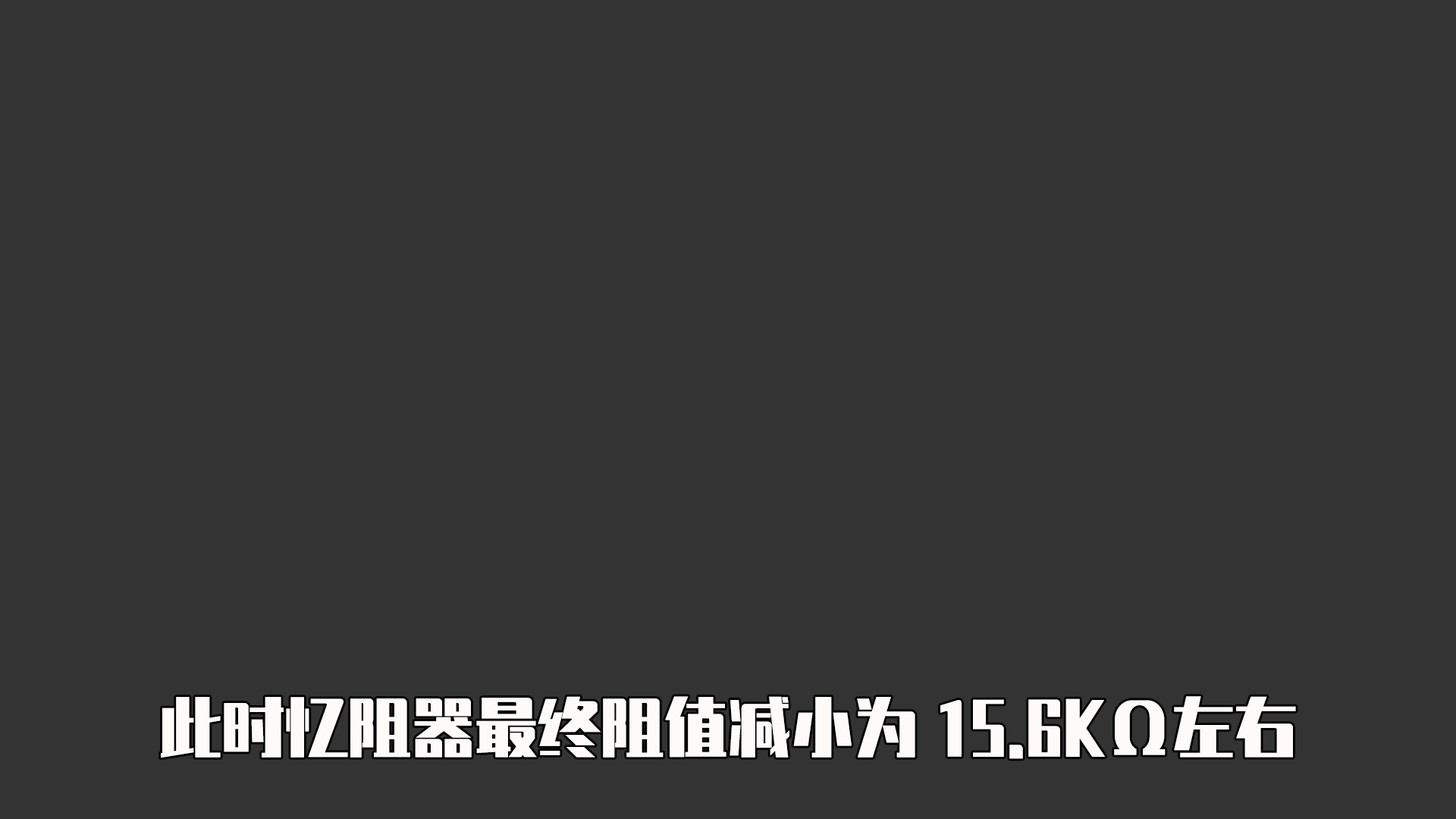
<style>
.page{position:relative;width:1456px;height:819px;background:#333333}
.page>*{position:absolute;margin:0}
.t1{font:63.2px "ZhenyanGB-Regular";color:#fefafa}
</style>
<div class="page">
<p class="t1" style="left:161px;top:696px;width:1135px;height:63px">此时忆阻器最终阻值减小为15.6KΩ左右</p>
</div>
